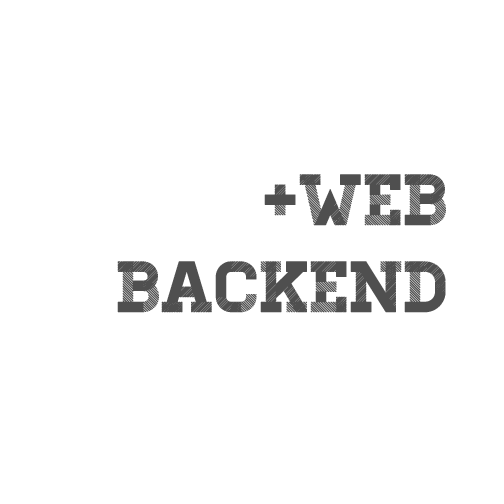
<style>
.page{position:relative;width:504px;height:504px;background:#ffffff}
.page>*{position:absolute;margin:0}
.t1{font:72px "Homestead-Display";color:#4f4f4f}
</style>
<div class="page">
<p class="t1" style="left:117px;top:174px;width:329px;height:139px;text-align:right">+Web<br>Backend</p>
</div>
